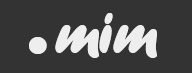
<style>
.page{position:relative;width:192px;height:73px;background:#333333}
.page>*{position:absolute;margin:0}
.t1{font:60px "ForteMT";letter-spacing:-0.025em;color:#eeeeee}
.t2{font:120px "ArialRoundedMTBold";letter-spacing:-0.025em;color:#eeeeee}
</style>
<div class="page">
<p class="t1" style="left:29px;top:13px;width:128px;height:45px"><span class="t2">.</span>mim</p>
</div>
